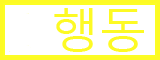
<style>
.page{position:relative;width:160px;height:60px;background:#ffffff}
.page>*{position:absolute;margin:0}
.t1{font:48px "MalgunGothicRegular";color:#fdfa24}
</style>
<div class="page">
<p class="t1" style="left:54px;top:8px;width:90px;height:44px">행동</p>
</div>
